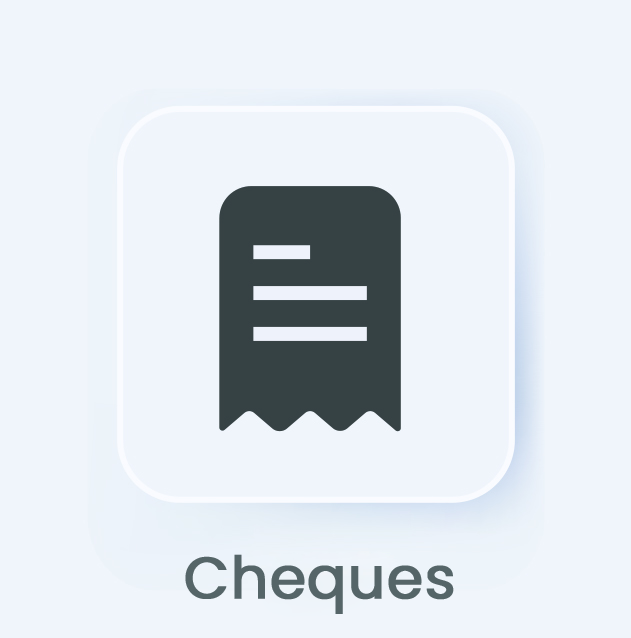
<style>
.page{position:relative;width:631px;height:638px;background:#f0f5fb}
.page>*{position:absolute;margin:0}
.t1{font:58.3px "Poppins-Regular";color:#556568;font-weight:bold}
</style>
<div class="page">
<p class="t1" style="left:185px;top:554px;width:269px;height:60px">Cheques</p>
</div>
